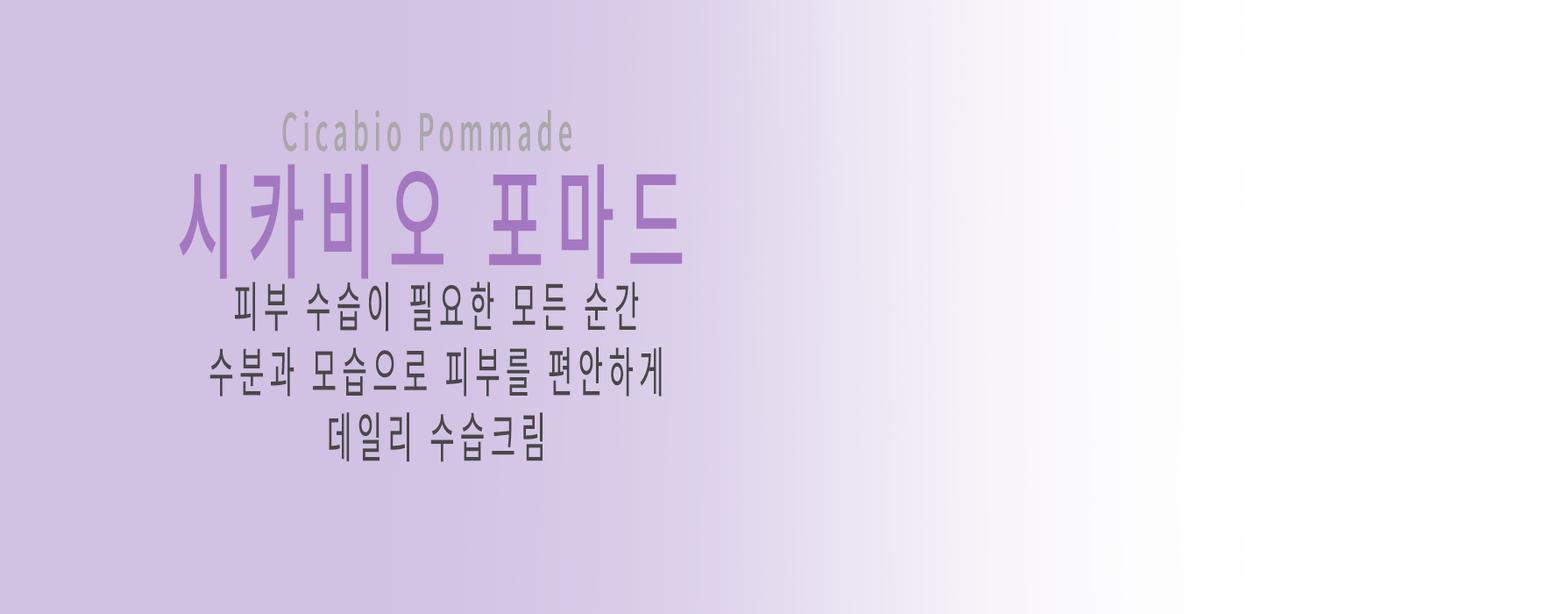
<style>
.page{position:relative;width:1568px;height:614px;background:#d1c1e3}
.page>*{position:absolute;margin:0}
.t1{font:50.8px "NotoSansCJKkr-Medium";letter-spacing:0.2em;color:#a8a8a8;scale:0.5 1}
.t2{font:126.1px "NotoSansCJKkr-Medium";letter-spacing:0.2em;color:#a478c0;scale:0.5 1}
.t3{font:54.3px "NotoSansCJKkr-Regular";letter-spacing:0.2em;color:#484848;scale:0.5 1}
</style>
<div class="page">
<p class="t1" style="left:282px;top:110px;width:289px;height:42px">Cicabio Pommade</p>
<p class="t2" style="left:179px;top:164px;width:504px;height:115px">시카비오 포마드</p>
<p class="t3" style="left:209px;top:281px;width:453px;height:181px;text-align:center">피부 수습이 필요한 모든 순간<br>수분과 모습으로 피부를 편안하게<br>데일리 수습크림</p>
</div>
